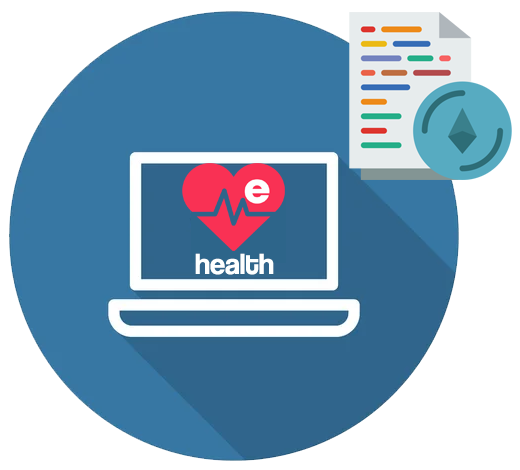
<style>
.page{position:relative;width:520px;height:470px;background:#ffffff}
.page>*{position:absolute;margin:0}
.t1{font:30px "CoolveticaRg-Regular";color:#fdffff}
</style>
<div class="page">
<p class="t1" style="left:195px;top:253px;width:79px;height:22px">health</p>
</div>
